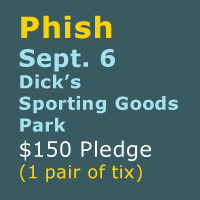
<style>
.page{position:relative;width:200px;height:200px;background:#395a61}
.page>*{position:absolute;margin:0}
.t1{font:18px "Verdana-Bold";letter-spacing:0.018em;color:#a3e2ee}
.t2{font:29px "Verdana-Bold";letter-spacing:0.018em;color:#fed200;font-weight:bold}
.t3{font:24px "Verdana-Bold";letter-spacing:0.018em;color:#a3e2ee}
.t4{font:21px "Verdana";letter-spacing:0.018em;color:#fdfdfc}
.t5{font:18px "Verdana";letter-spacing:0.018em;color:#fed200}
</style>
<div class="page">
<p class="t1" style="left:19px;top:15px;width:159px;height:167px"><span class="t2">Phish<br></span><span class="t3">Sept. 6 <br></span>Dick’s <br>Sporting Goods <br>Park<br><span class="t4">$150 Pledge<br></span><span class="t5">(1 pair of tix)</span></p>
</div>
